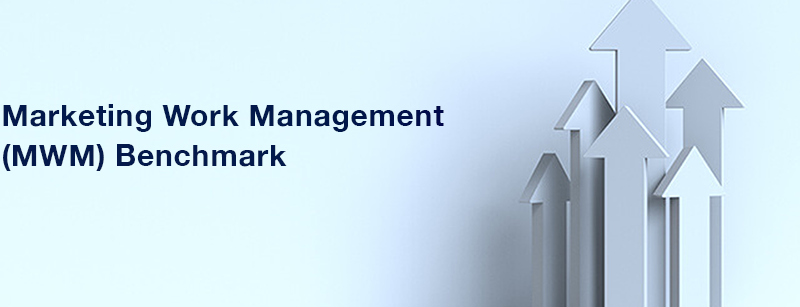
<style>
.page{position:relative;width:800px;height:307px}
.page>*{position:absolute;margin:0}
.t1{font:30.4px/40.1px "HelveticaNeue-Bold";letter-spacing:0.02em;color:#02194b}
</style>
<div class="page">
<p class="t1" style="left:3px;top:104px;width:441px;height:67px">Marketing Work Management<br>(MWM) Benchmark</p>
</div>
